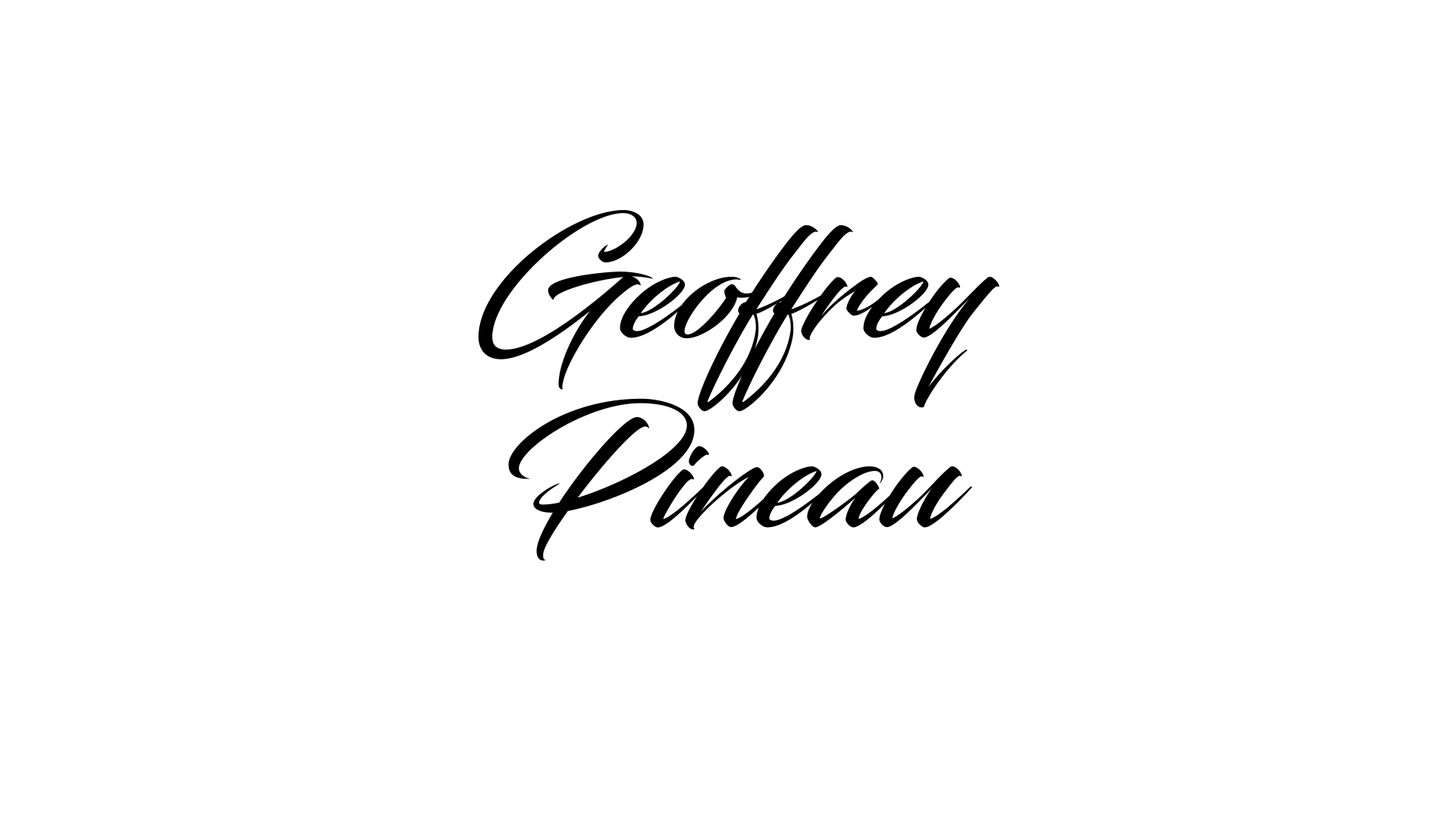
<style>
.page{position:relative;width:1456px;height:819px;background:#ffffff}
.page>*{position:absolute;margin:0}
.t1{font:151.7px/94.8px "Blacksword";color:#000000}
.t2{font:75.8px/94.8px "LuckiestGuy-Regular";color:#066d99}
</style>
<div class="page">
<p class="t1" style="left:479px;top:209px;width:520px;height:352px;text-align:center"><span class="t2"><br><br><br></span>Geoffrey <br><br>Pineau</p>
</div>
